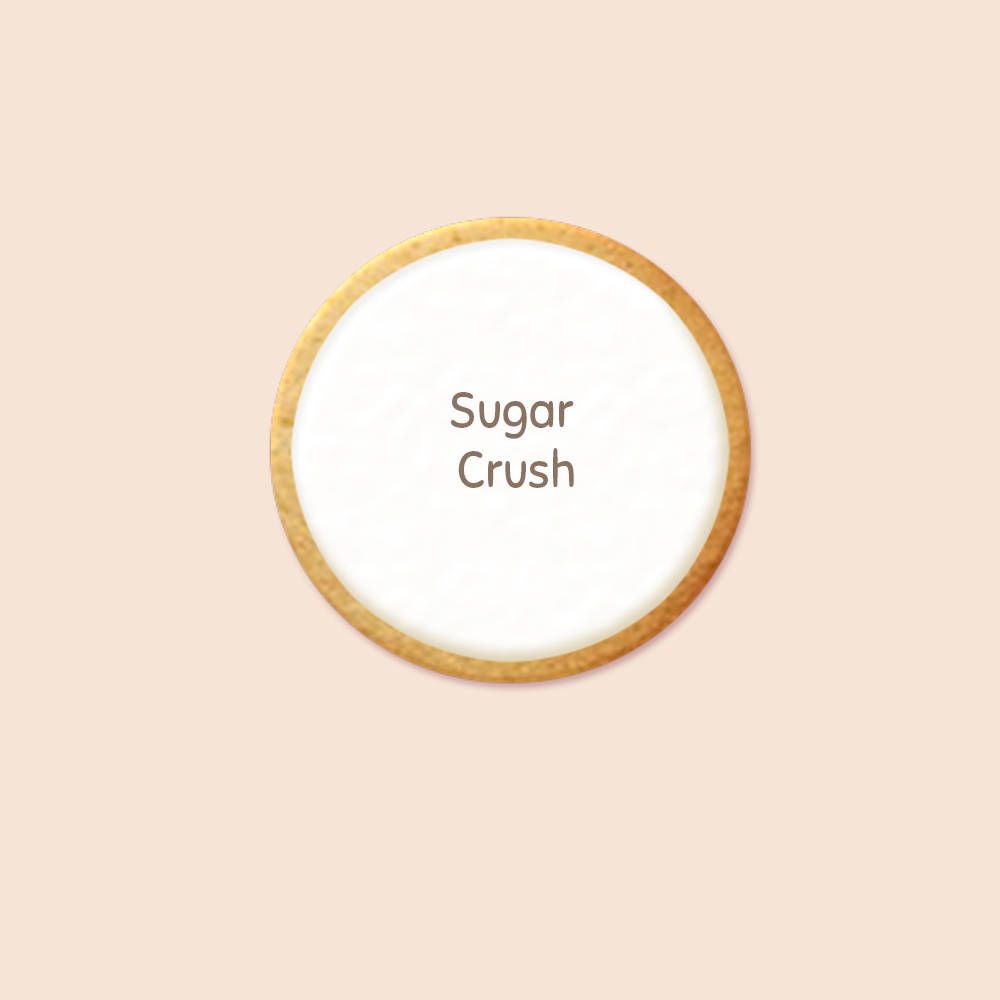
<style>
.page{position:relative;width:1000px;height:1000px;background:#f6e4d6}
.page>*{position:absolute;margin:0}
.t1{font:50.3px "Sniglet-Regular";color:#897365;scale:0.94 1}
</style>
<div class="page">
<p class="t1" style="left:451px;top:392px;width:123px;height:96px;text-align:center">Sugar <br>Crush</p>
</div>
